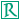
<style>
.page{position:relative;width:20px;height:20px;background:#ffffff}
.page>*{position:absolute;margin:0}
.t1{font:18px "Calligraphic421BT-RomanB";color:#009c75}
</style>
<div class="page">
<p class="t1" style="left:3px;top:3px;width:15px;height:15px">R</p>
</div>
